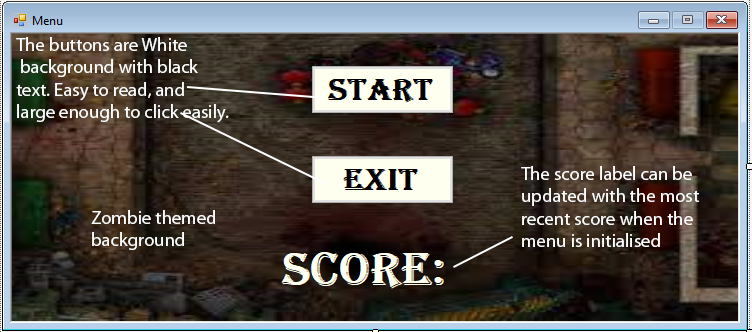
<style>
.page{position:relative;width:752px;height:332px}
.page>*{position:absolute;margin:0}
.t1{font:18.7px "MyriadPro-Regular";color:#fefefe}
</style>
<div class="page">
<p class="t1" style="left:16px;top:37px;width:213px;height:86px">The buttons are White<br> background with black<br>text. Easy to read, and<br>large enough to click easily.</p>
<p class="t1" style="left:521px;top:166px;width:178px;height:81px">The score label can be <br>updated with the most<br>recent score when the<br>menu is initialised</p>
<p class="t1" style="left:91px;top:210px;width:124px;height:40px">Zombie themed<br>background</p>
</div>
